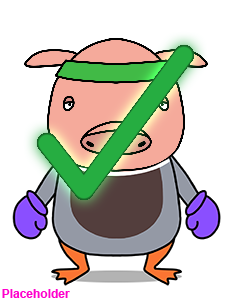
<style>
.page{position:relative;width:228px;height:300px;background:#ffffff}
.page>*{position:absolute;margin:0}
.t1{font:12px "Arial-BoldMT";color:#ff00cc}
</style>
<div class="page">
<p class="t1" style="left:2px;top:289px;width:68px;height:9px">Placeholder</p>
</div>
